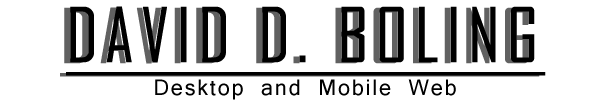
<style>
.page{position:relative;width:600px;height:100px;background:#ffffff}
.page>*{position:absolute;margin:0}
.t1{font:72px "AgencyFB-Reg";letter-spacing:0.075em;color:#000000;text-transform:uppercase;font-weight:bold;text-decoration:underline}
.t2{font:24px "Latha";letter-spacing:0.075em;color:#000000}
</style>
<div class="page">
<p class="t1" style="left:66px;top:6px;width:480px;height:70px">David D. Boling</p>
<p class="t2" style="left:155px;top:79px;width:301px;height:21px">Desktop and Mobile Web</p>
</div>
